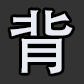
<style>
.page{position:relative;width:84px;height:84px;background:#333333}
.page>*{position:absolute;margin:0}
.t1{font:69.9px "AdobeHeitiStd-Regular";color:#eaecf3}
</style>
<div class="page">
<p class="t1" style="left:10px;top:10px;width:63px;height:64px">背</p>
</div>
